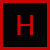
<style>
.page{position:relative;width:50px;height:50px;background:#040404}
.page>*{position:absolute;margin:0}
.t1{font:27.6px "LucidaGrande";color:#c70505}
</style>
<div class="page">
<p class="t1" style="left:17px;top:15px;width:16px;height:20px">H</p>
</div>
